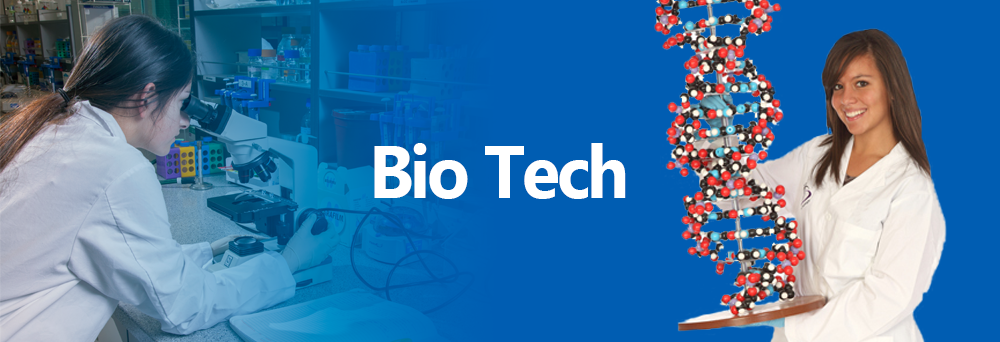
<style>
.page{position:relative;width:1000px;height:342px;background:#005db2}
.page>*{position:absolute;margin:0}
.t1{font:73.9px "MyanmarText-Bold";letter-spacing:-0.04em;color:#ffffff;scale:0.94 1}
</style>
<div class="page">
<p class="t1" style="left:374px;top:143px;width:252px;height:56px">Bio Tech</p>
</div>
